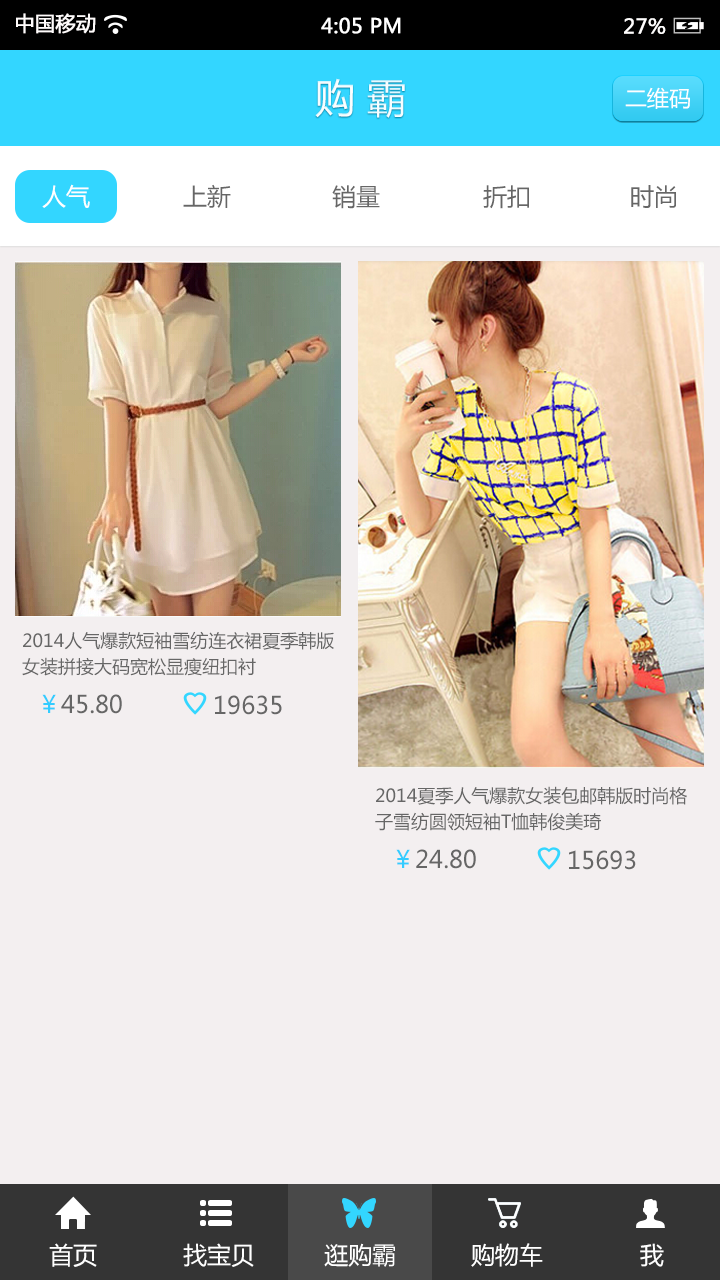
<style>
.page{position:relative;width:720px;height:1280px;background:#f3eff0}
.page>*{position:absolute;margin:0}
.t1{font:20px "MicrosoftYaHei";color:#fffcfc;font-weight:bold}
.t2{font:20px "MicrosoftYaHei";color:#ffffff;font-weight:bold}
.t3{font:20px "MicrosoftYaHei";color:#fffefe;font-weight:bold}
.t4{font:40px "MicrosoftYaHei";color:#ffffff}
.t5{font:22px "MicrosoftYaHei";color:#ffffff}
.t6{font:24px "MicrosoftYaHei";color:#ffffff}
.t7{font:24px "MicrosoftYaHei";color:#666666}
.t8{font:18px/26px "MicrosoftYaHei";color:#666666}
.t9{font:24px "MicrosoftYaHei";color:#33ccff}
</style>
<div class="page">
<p class="t1" style="left:16px;top:13px;width:80px;height:21px">中国移动</p>
<p class="t2" style="left:321px;top:17px;width:80px;height:17px">4:05 PM</p>
<p class="t3" style="left:624px;top:18px;width:42px;height:16px">27%</p>
<p class="t4" style="left:315px;top:78px;width:90px;height:40px">购 霸</p>
<p class="t5" style="left:625px;top:87px;width:65px;height:22px">二维码</p>
<p class="t6" style="left:42px;top:184px;width:48px;height:24px">人气</p>
<p class="t7" style="left:183px;top:184px;width:48px;height:24px">上新</p>
<p class="t7" style="left:332px;top:185px;width:48px;height:24px">销量</p>
<p class="t7" style="left:483px;top:185px;width:46px;height:24px">折扣</p>
<p class="t7" style="left:631px;top:185px;width:45px;height:23px">时尚</p>
<p class="t8" style="left:22px;top:631px;width:312px;height:45px">2014人气爆款短袖雪纺连衣裙夏季韩版<br>女装拼接大码宽松显瘦纽扣衬</p>
<p class="t7" style="left:42px;top:694px;width:80px;height:20px"><span class="t9">￥</span>45.80</p>
<p class="t7" style="left:215px;top:695px;width:67px;height:20px">19635</p>
<p class="t8" style="left:375px;top:786px;width:312px;height:45px">2014夏季人气爆款女装包邮韩版时尚格<br>子雪纺圆领短袖T恤韩俊美琦</p>
<p class="t7" style="left:396px;top:849px;width:80px;height:20px"><span class="t9">￥</span>24.80</p>
<p class="t7" style="left:569px;top:850px;width:67px;height:20px">15693</p>
<p class="t6" style="left:49px;top:1243px;width:48px;height:24px">首页</p>
<p class="t6" style="left:183px;top:1243px;width:71px;height:24px">找宝贝</p>
<p class="t6" style="left:324px;top:1243px;width:71px;height:24px">逛购霸</p>
<p class="t6" style="left:471px;top:1243px;width:72px;height:24px">购物车</p>
<p class="t6" style="left:640px;top:1243px;width:24px;height:24px">我</p>
</div>
